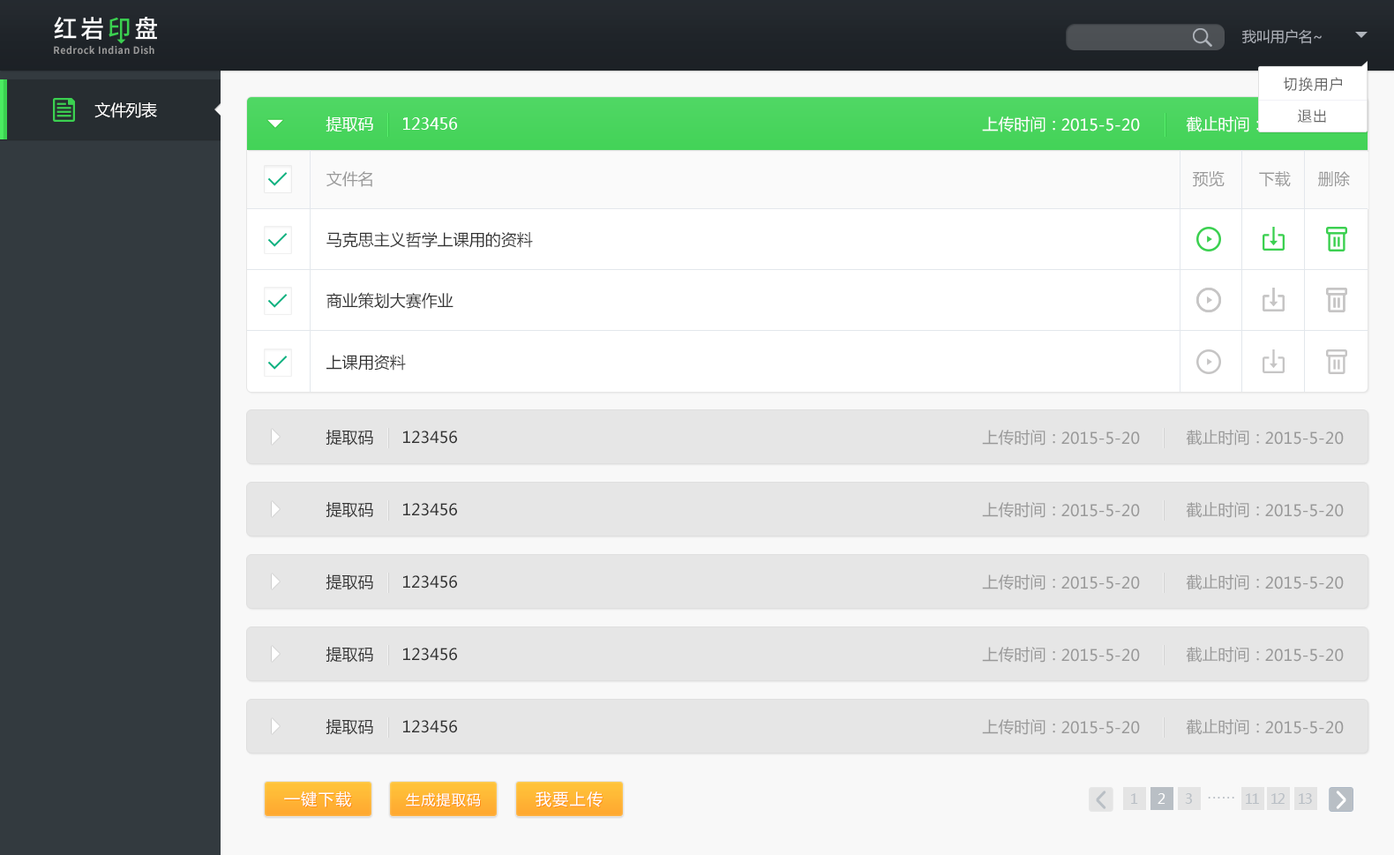
<style>
.page{position:relative;width:1394px;height:855px;background:#e6e6e6}
.page>*{position:absolute;margin:0}
.t1{font:14.1px "MicrosoftYaHei";color:#adb2b9}
.t2{font:9.9px "SourceHanSansCN-Bold";letter-spacing:0.05em;color:#999999;scale:0.95 1}
.t3{font:14.1px "MicrosoftYaHei";letter-spacing:0.08em;color:#666666}
.t4{font:15.9px "MicrosoftYaHei";letter-spacing:-0.025em;color:#ffffff}
.t5{font:15.9px "MicrosoftYaHei";color:#ffffff}
.t6{font:15.9px "MicrosoftYaHei";color:#999999}
.t7{font:15.9px "MicrosoftYaHei";color:#333333}
.t8{font:15.9px "MicrosoftYaHei";letter-spacing:0.08em;color:#ffffff}
.t9{font:14.1px "MicrosoftYaHei";letter-spacing:0.08em;color:#ffffff}
.t10{font:14.1px "MicrosoftYaHei";letter-spacing:-0.1em;color:#b9bfc5}
.t11{font:14.1px "MicrosoftYaHei";letter-spacing:-0.1em;color:#ffffff}
</style>
<div class="page">
<p class="t1" style="left:1243px;top:29px;width:79px;height:15px;opacity:0.97">我叫用户名~</p>
<p class="t2" style="left:54px;top:46px;width:100px;height:9px">Redrock Indian Dish</p>
<p class="t3" style="left:1284px;top:77px;width:58px;height:15px">切换用户</p>
<p class="t4" style="left:94px;top:102px;width:63px;height:16px">文件列表</p>
<p class="t3" style="left:1298px;top:109px;width:28px;height:14px">退出</p>
<p class="t5" style="left:326px;top:116px;width:47px;height:15px">提取码</p>
<p class="t5" style="left:403px;top:117px;width:55px;height:13px">123456</p>
<p class="t5" style="left:982px;top:116px;width:73px;height:16px">上传时间：</p>
<p class="t5" style="left:1062px;top:118px;width:78px;height:13px">2015-5-20</p>
<p class="t5" style="left:1186px;top:116px;width:73px;height:16px">截止时间：</p>
<p class="t6" style="left:327px;top:171px;width:45px;height:16px">文件名</p>
<p class="t6" style="left:1193px;top:171px;width:32px;height:16px">预览</p>
<p class="t6" style="left:1259px;top:171px;width:32px;height:16px">下载</p>
<p class="t6" style="left:1318px;top:171px;width:32px;height:16px">删除</p>
<p class="t7" style="left:327px;top:232px;width:206px;height:16px">马克思主义哲学上课用的资料</p>
<p class="t7" style="left:327px;top:292px;width:127px;height:17px">商业策划大赛作业</p>
<p class="t7" style="left:327px;top:355px;width:79px;height:16px">上课用资料</p>
<p class="t7" style="left:326px;top:430px;width:47px;height:16px">提取码</p>
<p class="t7" style="left:403px;top:431px;width:54px;height:13px">123456</p>
<p class="t6" style="left:982px;top:430px;width:73px;height:16px">上传时间：</p>
<p class="t6" style="left:1062px;top:432px;width:78px;height:13px">2015-5-20</p>
<p class="t6" style="left:1186px;top:430px;width:73px;height:16px">截止时间：</p>
<p class="t6" style="left:1266px;top:432px;width:78px;height:13px">2015-5-20</p>
<p class="t7" style="left:326px;top:502px;width:47px;height:16px">提取码</p>
<p class="t7" style="left:403px;top:503px;width:54px;height:13px">123456</p>
<p class="t6" style="left:982px;top:502px;width:73px;height:16px">上传时间：</p>
<p class="t6" style="left:1062px;top:504px;width:78px;height:13px">2015-5-20</p>
<p class="t6" style="left:1186px;top:502px;width:73px;height:16px">截止时间：</p>
<p class="t6" style="left:1266px;top:504px;width:78px;height:13px">2015-5-20</p>
<p class="t7" style="left:326px;top:575px;width:47px;height:15px">提取码</p>
<p class="t7" style="left:403px;top:575px;width:54px;height:14px">123456</p>
<p class="t6" style="left:982px;top:575px;width:73px;height:15px">上传时间：</p>
<p class="t6" style="left:1062px;top:576px;width:78px;height:14px">2015-5-20</p>
<p class="t6" style="left:1186px;top:575px;width:73px;height:15px">截止时间：</p>
<p class="t6" style="left:1266px;top:576px;width:78px;height:14px">2015-5-20</p>
<p class="t7" style="left:326px;top:647px;width:47px;height:16px">提取码</p>
<p class="t7" style="left:403px;top:648px;width:54px;height:13px">123456</p>
<p class="t6" style="left:982px;top:647px;width:73px;height:16px">上传时间：</p>
<p class="t6" style="left:1062px;top:649px;width:78px;height:13px">2015-5-20</p>
<p class="t6" style="left:1186px;top:647px;width:73px;height:16px">截止时间：</p>
<p class="t6" style="left:1266px;top:649px;width:78px;height:13px">2015-5-20</p>
<p class="t7" style="left:326px;top:719px;width:47px;height:16px">提取码</p>
<p class="t7" style="left:403px;top:720px;width:54px;height:13px">123456</p>
<p class="t6" style="left:982px;top:719px;width:73px;height:16px">上传时间：</p>
<p class="t6" style="left:1062px;top:721px;width:78px;height:13px">2015-5-20</p>
<p class="t6" style="left:1186px;top:719px;width:73px;height:16px">截止时间：</p>
<p class="t6" style="left:1266px;top:721px;width:78px;height:13px">2015-5-20</p>
<p class="t8" style="left:284px;top:792px;width:67px;height:16px">一键下载</p>
<p class="t9" style="left:406px;top:793px;width:75px;height:15px">生成提取码</p>
<p class="t8" style="left:536px;top:792px;width:67px;height:16px">我要上传</p>
<p class="t10" style="left:1131px;top:793px;width:7px;height:11px">1</p>
<p class="t11" style="left:1158px;top:793px;width:8px;height:11px">2</p>
<p class="t10" style="left:1185px;top:793px;width:7px;height:11px">3</p>
<p class="t10" style="left:1208px;top:797px;width:27px;height:2px">. . . . . .</p>
<p class="t10" style="left:1246px;top:793px;width:13px;height:11px">11</p>
<p class="t10" style="left:1272px;top:793px;width:13px;height:11px">12</p>
<p class="t10" style="left:1299px;top:793px;width:13px;height:11px">13</p>
</div>
